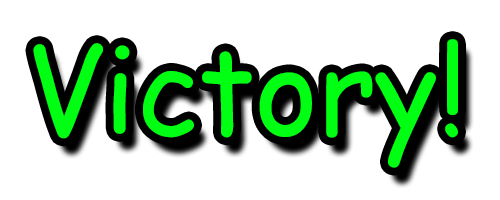
<style>
.page{position:relative;width:500px;height:200px;background:#ffffff}
.page>*{position:absolute;margin:0}
.t1{font:120px "ComicSansMS";color:#00ff12}
</style>
<div class="page">
<p class="t1" style="left:33px;top:39px;width:425px;height:129px">Victory!</p>
</div>
